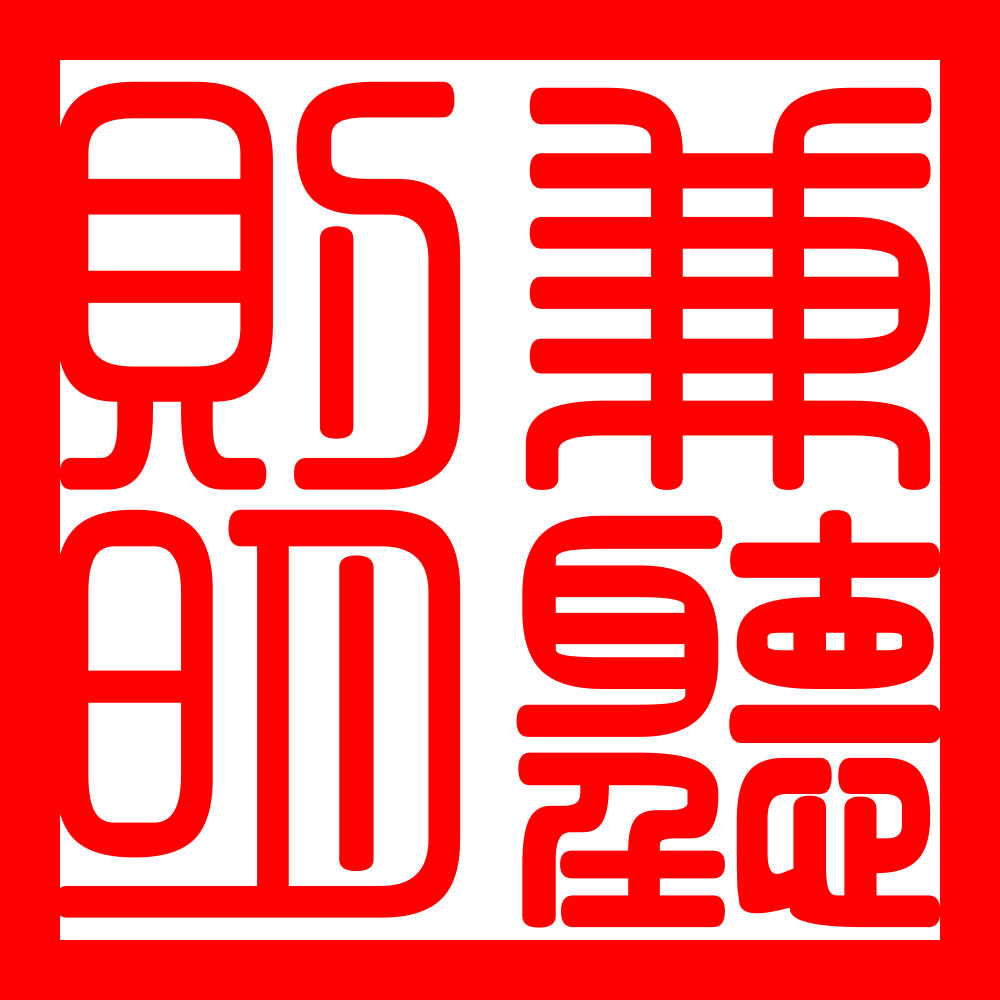
<style>
.page{position:relative;width:1000px;height:1000px;background:#ff0000}
.page>*{position:absolute;margin:0}
.t1{font:450px "¾­µä·±·½×­ Regular";color:#ff0000}
</style>
<div class="page">
<p class="t1" style="left:55px;top:81px;width:406px;height:409px">则</p>
<p class="t1" style="left:525px;top:87px;width:407px;height:403px">兼</p>
<p class="t1" style="left:55px;top:509px;width:406px;height:409px">明</p>
<p class="t1" style="left:516px;top:510px;width:426px;height:418px">听</p>
</div>
